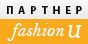
<style>
.page{position:relative;width:88px;height:44px;background:#f8aa1c}
.page>*{position:absolute;margin:0}
.t1{font:11px "MyriadPro-Bold";letter-spacing:0.44em;color:#010101;text-transform:uppercase}
.t2{font:19.7px "BellMTItalic";color:#ffffff}
.t3{font:16.9px "BookAntiqua-Italic";color:#ffffff;font-weight:bold}
</style>
<div class="page">
<p class="t1" style="left:7px;top:6px;width:75px;height:8px">партнер</p>
<p class="t2" style="left:7px;top:23px;width:58px;height:18px">fashion</p>
<p class="t3" style="left:68px;top:25px;width:14px;height:13px">U</p>
</div>
